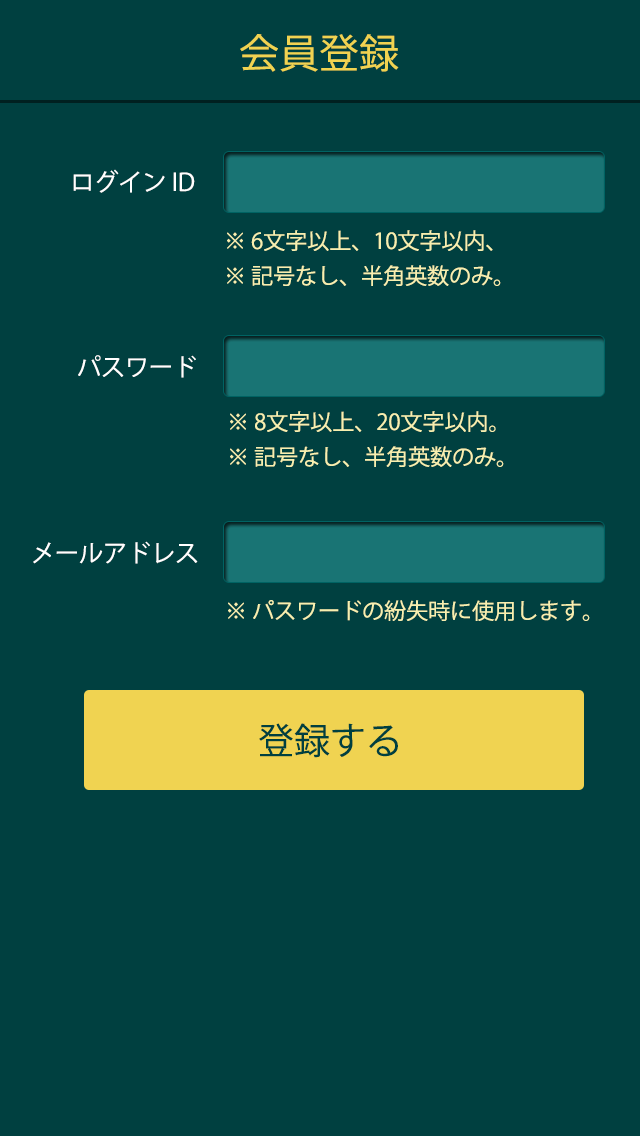
<style>
.page{position:relative;width:640px;height:1136px;background:#004040}
.page>*{position:absolute;margin:0}
.t1{font:40px "KozGoPr6N-Regular";color:#f0d351}
.t2{font:24px "KozGoPr6N-Regular";color:#ffffff}
.t3{font:22px/35px "KozGoPr6N-Regular";color:#f7efb0}
.t4{font:22px "KozGoPr6N-Regular";color:#f7efb0}
.t5{font:36px "KozGoPr6N-Regular";color:#004040}
</style>
<div class="page">
<p class="t1" style="left:240px;top:34px;width:159px;height:38px">会員登録</p>
<p class="t2" style="left:73px;top:169px;width:122px;height:24px">ログイン ID</p>
<p class="t3" style="left:227px;top:230px;width:274px;height:56px">※ 6文字以上、10文字以内、<br>※ 記号なし、半角英数のみ。</p>
<p class="t2" style="left:78px;top:355px;width:118px;height:23px">パスワード</p>
<p class="t3" style="left:230px;top:411px;width:274px;height:56px">※ 8文字以上、20文字以内。<br>※ 記号なし、半角英数のみ。</p>
<p class="t2" style="left:33px;top:541px;width:165px;height:23px">メールアドレス</p>
<p class="t4" style="left:228px;top:600px;width:362px;height:21px">※ パスワードの紛失時に使用します。</p>
<p class="t5" style="left:259px;top:723px;width:139px;height:35px">登録する</p>
</div>
